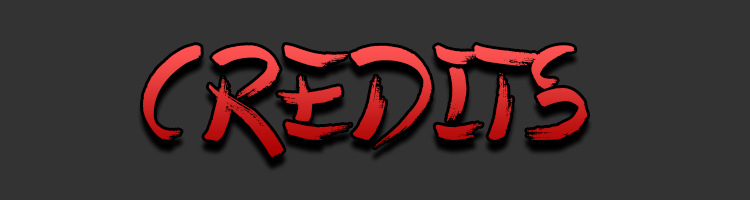
<style>
.page{position:relative;width:750px;height:200px;background:#333333}
.page>*{position:absolute;margin:0}
.t1{font:134.7px "ChineseTakeaway";scale:1.07 1}
</style>
<div class="page">
<p class="t1" style="left:143px;top:44px;width:444px;height:113px">Credits</p>
</div>
